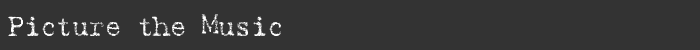
<style>
.page{position:relative;width:700px;height:50px;background:#333333}
.page>*{position:absolute;margin:0}
.t1{font:28px "Harting-Plain";letter-spacing:-0.025em;color:#ffffff}
</style>
<div class="page">
<p class="t1" style="left:8px;top:14px;width:273px;height:22px">Picture the Music</p>
</div>
